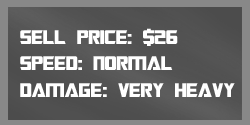
<style>
.page{position:relative;width:250px;height:125px}
.page>*{position:absolute;margin:0}
.t1{font:22px "TransformersMovie";color:#ffffff}
.t2{font:22px "TransformersMovie";letter-spacing:0.02em;color:#ffffff}
</style>
<div class="page">
<p class="t1" style="left:20px;top:28px;width:215px;height:69px">sell price: $26<br>spee<span class="t2">d</span>: normal<br>dama<span class="t2">ge</span>: very heavy</p>
</div>
